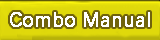
<style>
.page{position:relative;width:160px;height:40px}
.page>*{position:absolute;margin:0}
.t1{font:20px "DengXian-Regular";color:#ffffff;font-weight:bold}
</style>
<div class="page">
<p class="t1" style="left:10px;top:12px;width:140px;height:15px">Combo Manual</p>
</div>
